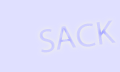
<style>
.page{position:relative;width:120px;height:72px;background:#e0e0ff}
.page>*{position:absolute;margin:0}
.t1{font:33.3px "MyriadPro-Regular";color:#cfcfff;scale:1.03 1}
</style>
<div class="page">
<p class="t1" style="left:39px;top:20px;width:77px;height:33px;rotate:-8deg">SACK</p>
</div>
